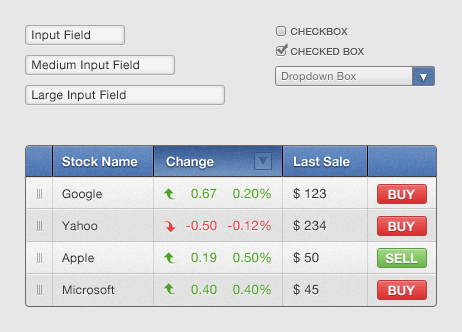
<style>
.page{position:relative;width:462px;height:332px;background:#e7e7e7}
.page>*{position:absolute;margin:0}
.t1{font:12px "HelveticaNeue";letter-spacing:0.025em;color:#353535}
.t2{font:10px "HelveticaNeue";letter-spacing:0.025em;color:#565656;text-transform:uppercase}
.t3{font:11px "HelveticaNeue";letter-spacing:0.01em;color:#6c6c6c}
.t4{font:13px "HelveticaNeue-Bold";color:#ffffff}
.t5{font:12px/32px "HelveticaNeue";letter-spacing:0.02em;color:#363636}
.t6{font:13px/32px "HelveticaNeue";letter-spacing:0.02em;color:#4aa31e}
.t7{font:13px/32px "HelveticaNeue";letter-spacing:0.02em;color:#e33f3f}
.t8{font:13px/32px "HelveticaNeue";letter-spacing:0.02em;color:#363636}
</style>
<div class="page">
<p class="t1" style="left:32px;top:30px;width:58px;height:12px">Input Field</p>
<p class="t2" style="left:290px;top:28px;width:58px;height:7px">Checkbox</p>
<p class="t2" style="left:290px;top:48px;width:74px;height:7px">Checked box</p>
<p class="t1" style="left:32px;top:60px;width:107px;height:12px">Medium Input Field</p>
<p class="t3" style="left:282px;top:72px;width:74px;height:11px">Dropdown Box</p>
<p class="t1" style="left:32px;top:90px;width:94px;height:12px">Large Input Field</p>
<p class="t4" style="left:62px;top:156px;width:76px;height:11px">Stock Name</p>
<p class="t4" style="left:166px;top:156px;width:48px;height:13px">Change</p>
<p class="t4" style="left:294px;top:156px;width:56px;height:11px">Last Sale</p>
<p class="t5" style="left:62px;top:189px;width:53px;height:106px">Google<br>Yahoo<br>Apple<br>Microsoft</p>
<p class="t6" style="left:186px;top:188px;width:31px;height:107px;text-align:right">0.67<br><span class="t7">-0.50<br></span>0.19<br>0.40</p>
<p class="t6" style="left:228px;top:188px;width:43px;height:107px;text-align:right">0.20%<br><span class="t7">-0.12%<br></span>0.50%<br>0.40%</p>
<p class="t8" style="left:293px;top:187px;width:33px;height:109px">$ 123<br>$ 234<br>$ 50<br>$ 45</p>
<p class="t4" style="left:388px;top:189px;width:27px;height:11px">BUY</p>
<p class="t4" style="left:388px;top:221px;width:27px;height:11px">BUY</p>
<p class="t4" style="left:385px;top:253px;width:33px;height:11px">SELL</p>
<p class="t4" style="left:388px;top:285px;width:27px;height:11px">BUY</p>
</div>
